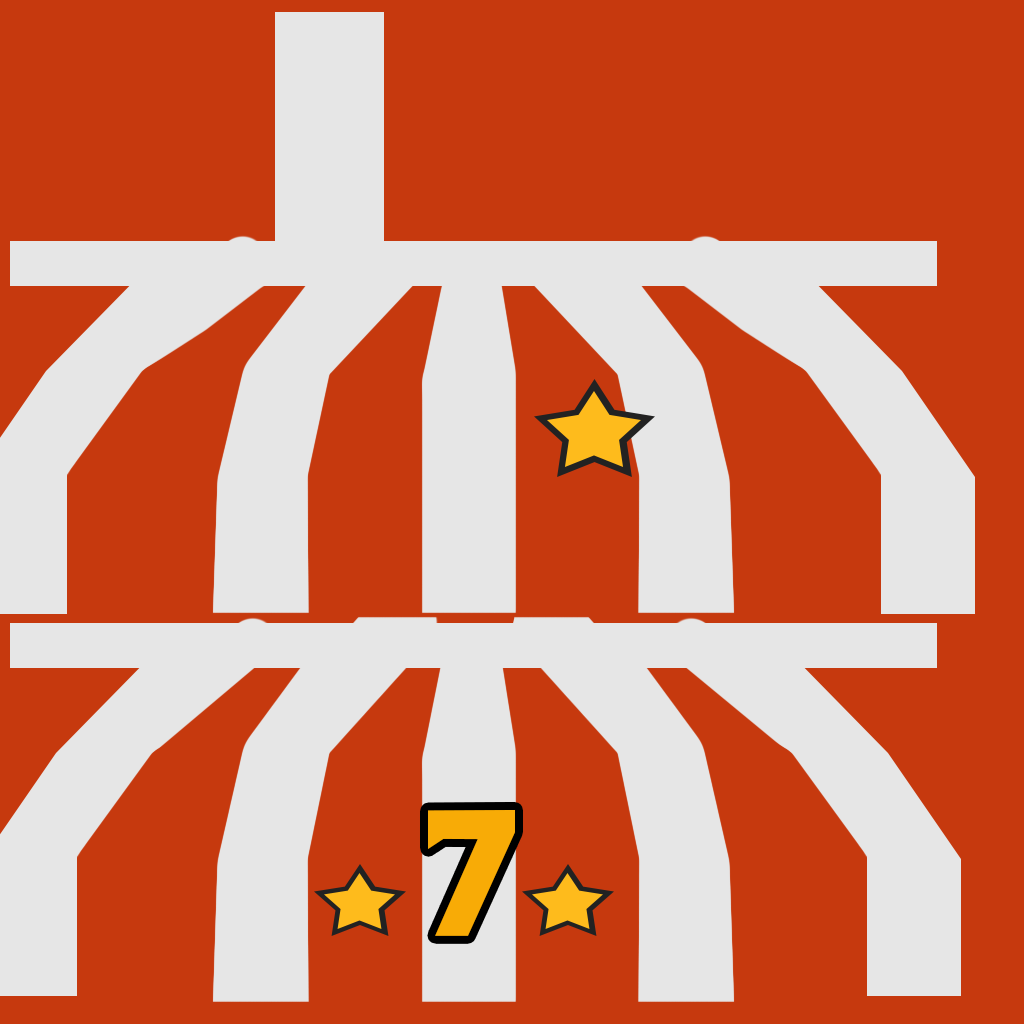
<style>
.page{position:relative;width:1024px;height:1024px;background:#c6390e}
.page>*{position:absolute;margin:0}
.t1{font:179.4px "Luchador-Regular";letter-spacing:0.05em;color:#f8ab06}
</style>
<div class="page">
<p class="t1" style="left:428px;top:809px;width:87px;height:127px">7</p>
</div>
